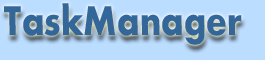
<style>
.page{position:relative;width:265px;height:60px;background:#bbddff}
.page>*{position:absolute;margin:0}
.t1{font:43.2px "Aharoni-Bold";color:#336699;scale:0.85 1}
</style>
<div class="page">
<p class="t1" style="left:4px;top:3px;width:238px;height:42px">TaskManager</p>
</div>
